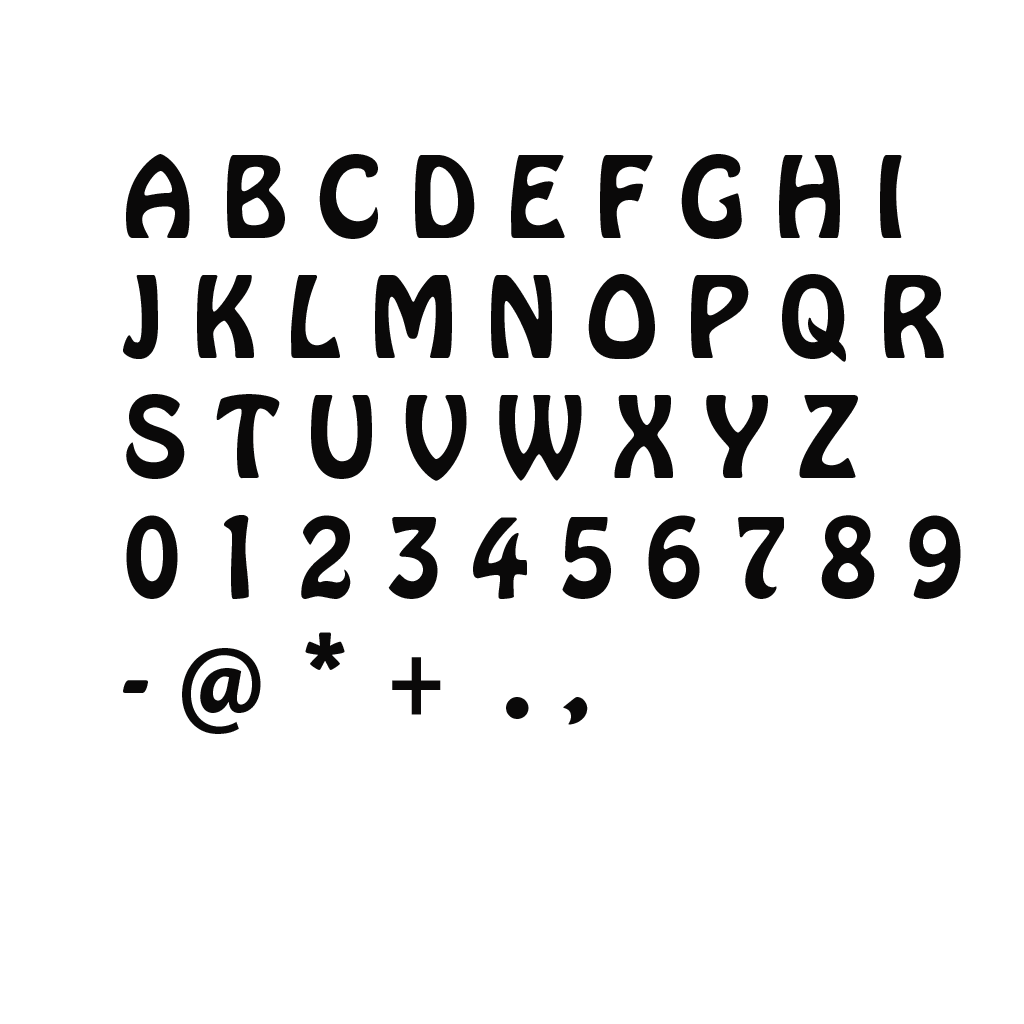
<style>
.page{position:relative;width:1024px;height:1024px;background:#ffffff}
.page>*{position:absolute;margin:0}
.t1{font:100px "HoboStd";color:#0a0909}
</style>
<div class="page">
<p class="t1" style="left:123px;top:154px;width:838px;height:580px">A B C D E F G H I<br>J K L M N O P Q R<br>S T U V W X Y Z<br>0 1 2 3 4 5 6 7 8 9<br>- @ * +  . ,</p>
</div>
